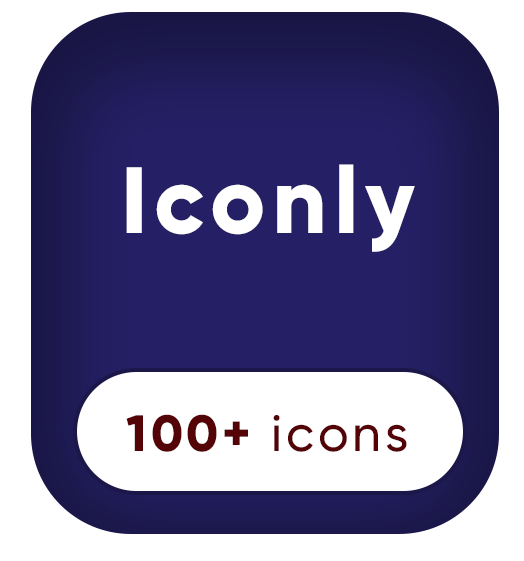
<style>
.page{position:relative;width:524px;height:561px;background:#ffffff}
.page>*{position:absolute;margin:0}
.t1{font:93.8px "Gilroy-ExtraBold";letter-spacing:0.075em;color:#ffffff}
.t2{font:50.9px "Gilroy-Medium";letter-spacing:0.075em;color:#540306}
.t3{font:50.9px "Gilroy-ExtraBold";letter-spacing:0.075em;color:#540306}
</style>
<div class="page">
<p class="t1" style="left:126px;top:164px;width:289px;height:88px">Iconly</p>
<p class="t2" style="left:126px;top:414px;width:281px;height:38px"><span class="t3">100+ </span>icons</p>
</div>
